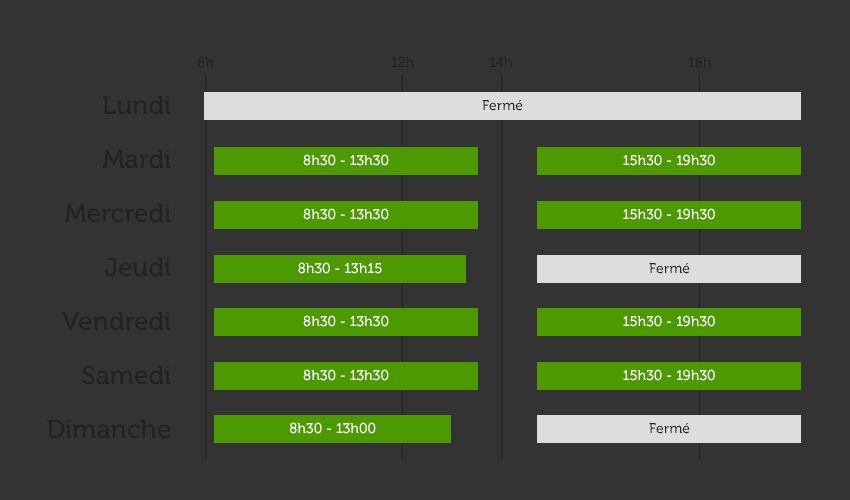
<style>
.page{position:relative;width:850px;height:500px;background:#333333}
.page>*{position:absolute;margin:0}
.t1{font:14px "Museo-500";color:#222222}
.t2{font:26px/54px "Museo-500";color:#222222}
.t3{font:14px "Museo-500";color:#ffffff}
</style>
<div class="page">
<p class="t1" style="left:198px;top:56px;width:16px;height:12px">8h</p>
<p class="t1" style="left:391px;top:56px;width:23px;height:11px">12h</p>
<p class="t1" style="left:490px;top:57px;width:22px;height:10px">14h</p>
<p class="t1" style="left:688px;top:56px;width:23px;height:12px">18h</p>
<p class="t2" style="left:47px;top:95px;width:124px;height:344px;text-align:right">Lundi<br>Mardi<br>Mercredi<br>Jeudi<br>Vendredi<br>Samedi<br>Dimanche</p>
<p class="t1" style="left:482px;top:100px;width:41px;height:11px">Fermé</p>
<p class="t3" style="left:303px;top:154px;width:86px;height:12px">8h30 - 13h30</p>
<p class="t3" style="left:623px;top:154px;width:92px;height:12px">15h30 - 19h30</p>
<p class="t3" style="left:303px;top:208px;width:86px;height:12px">8h30 - 13h30</p>
<p class="t3" style="left:623px;top:208px;width:92px;height:12px">15h30 - 19h30</p>
<p class="t3" style="left:298px;top:262px;width:84px;height:12px">8h30 - 13h15</p>
<p class="t1" style="left:649px;top:263px;width:41px;height:11px">Fermé</p>
<p class="t3" style="left:303px;top:315px;width:86px;height:12px">8h30 - 13h30</p>
<p class="t3" style="left:623px;top:315px;width:92px;height:12px">15h30 - 19h30</p>
<p class="t3" style="left:303px;top:369px;width:86px;height:12px">8h30 - 13h30</p>
<p class="t3" style="left:623px;top:369px;width:92px;height:12px">15h30 - 19h30</p>
<p class="t3" style="left:290px;top:422px;width:86px;height:12px">8h30 - 13h00</p>
<p class="t1" style="left:649px;top:423px;width:41px;height:11px">Fermé</p>
</div>
